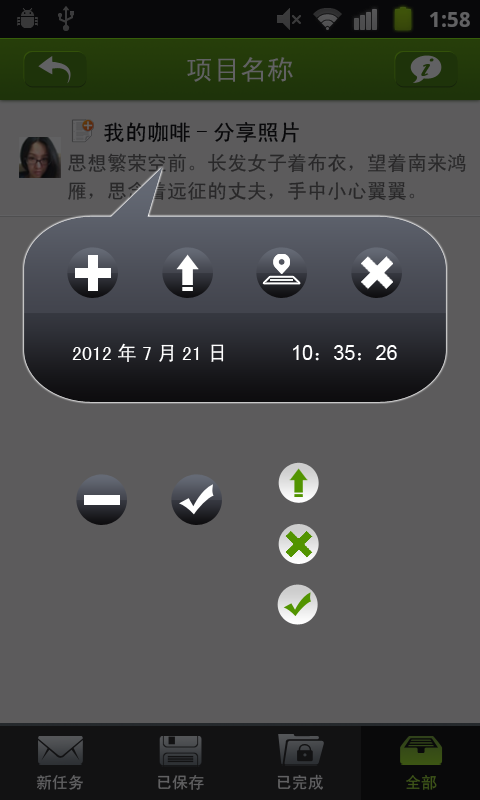
<style>
.page{position:relative;width:480px;height:800px;background:#5c5b5c}
.page>*{position:absolute;margin:0}
.t1{font:27px "SimHei";color:#616163}
.t2{font:30.1px "MonotypeCorsiva";color:#1e330a;font-weight:bold}
.t3{font:22px "SimHei";color:#000000}
.t4{font:20px/28px "SimHei";color:#292829}
.t5{font:20px "SimHei";color:#ffffff}
.t6{font:20px "ArialMT";color:#ffffff}
.t7{font:16px "SimHei";color:#616163}
.t8{font:16px "SimHei";color:#3e5518}
</style>
<div class="page">
<p class="t1" style="left:187px;top:57px;width:106px;height:25px">项目名称</p>
<p class="t2" style="left:421px;top:58px;width:13px;height:18px;rotate:16deg">i</p>
<p class="t3" style="left:104px;top:122px;width:195px;height:21px">我的咖啡-分享照片</p>
<p class="t4" style="left:68px;top:153px;width:398px;height:48px">思想繁荣空前。长发女子着布衣，望着南来鸿<br>雁，思念着远征的丈夫，手中小心翼翼。</p>
<p class="t5" style="left:72px;top:343px;width:152px;height:19px">2012年7月21日</p>
<p class="t6" style="left:293px;top:345px;width:104px;height:16px">10<span class="t5">：</span>35<span class="t5">：</span>26</p>
<p class="t7" style="left:277px;top:774px;width:46px;height:16px">已完成</p>
<p class="t7" style="left:36px;top:775px;width:47px;height:15px">新任务</p>
<p class="t7" style="left:158px;top:775px;width:46px;height:15px">已保存</p>
<p class="t8" style="left:406px;top:775px;width:31px;height:15px">全部</p>
</div>
